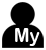
<style>
.page{position:relative;width:46px;height:50px;background:#ffffff}
.page>*{position:absolute;margin:0}
.t1{font:19px "ArialRoundedMTBold";color:#ffffff}
</style>
<div class="page">
<p class="t1" style="left:15px;top:28px;width:25px;height:18px">My</p>
</div>
